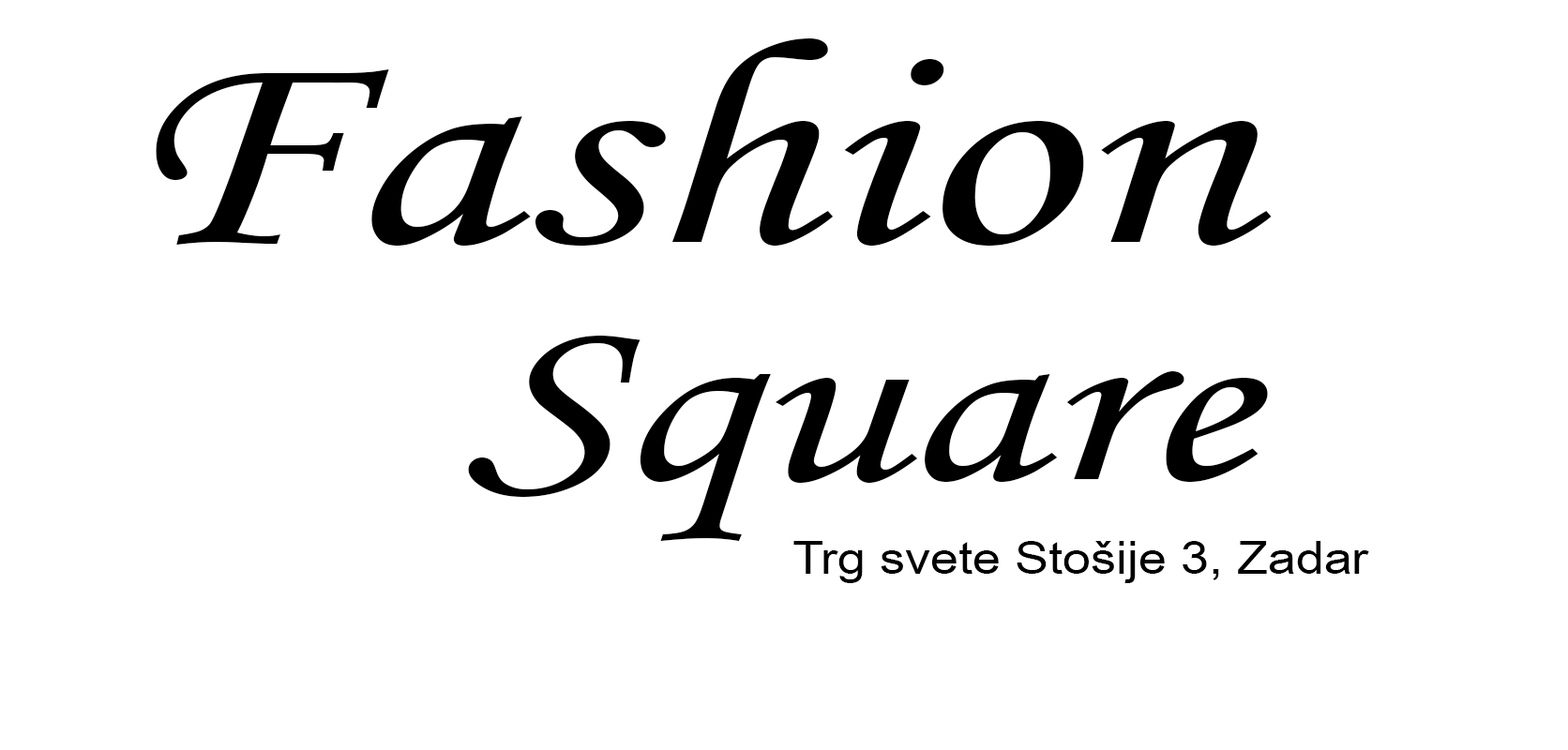
<style>
.page{position:relative;width:1568px;height:750px;background:#ffffff}
.page>*{position:absolute;margin:0}
.t1{font:295.6px/218.1px "MonotypeCorsiva";color:#000000;scale:1.35 1}
.t2{font:245.7px/237.6px "MonotypeCorsiva";color:#000000;scale:1.35 1}
.t3{font:45.6px "ArialNarrow";color:#000000;scale:1.35 1}
</style>
<div class="page">
<p class="t1" style="left:156px;top:38px;width:1116px;height:503px;text-align:right">Fashion<br><span class="t2">Square</span></p>
<p class="t3" style="left:793px;top:541px;width:576px;height:42px">Trg svete Stošije 3, Zadar</p>
</div>
